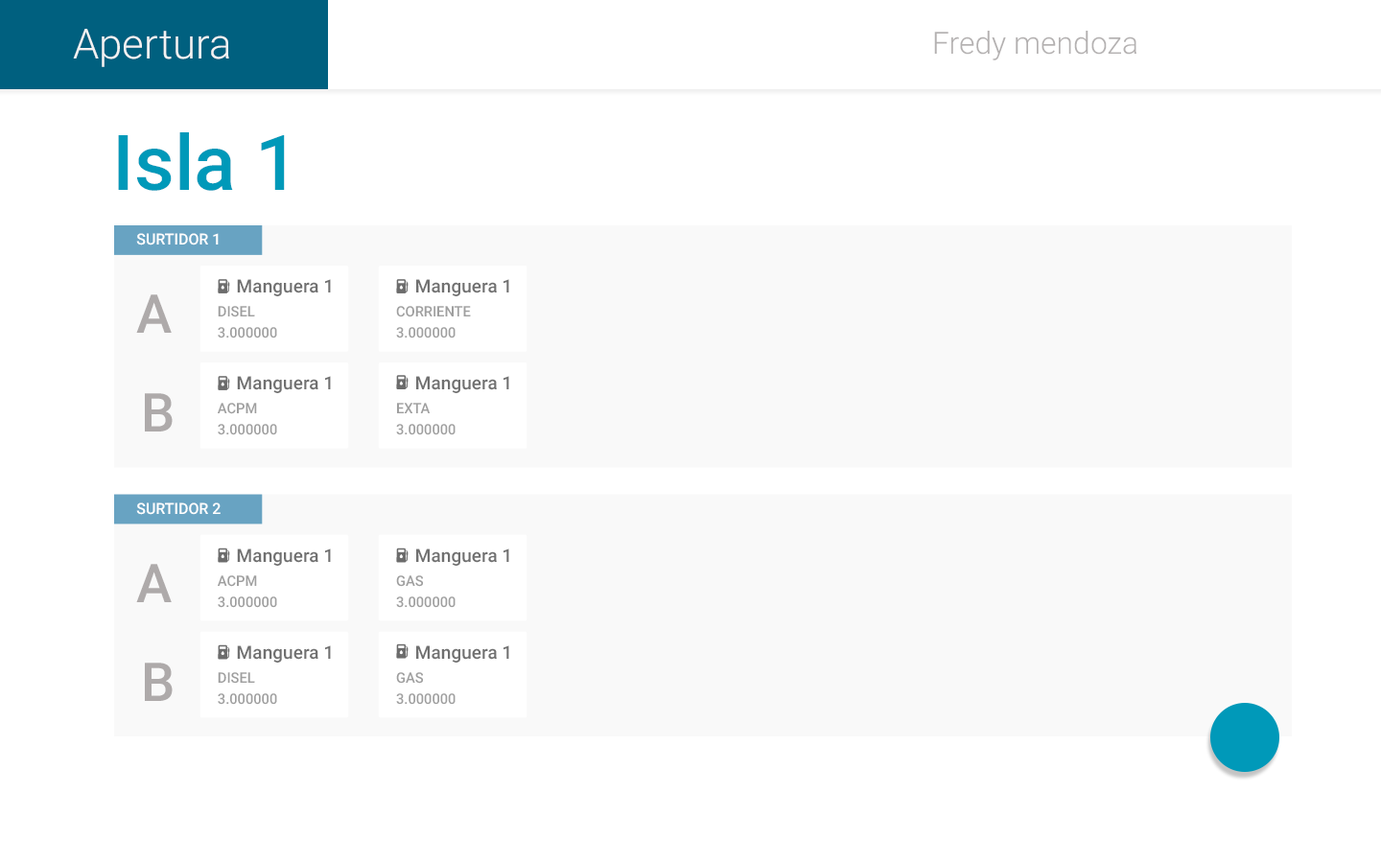
<style>
.page{position:relative;width:1381px;height:863px;background:#ffffff}
.page>*{position:absolute;margin:0}
.t1{font:41.7px "Roboto-Light";color:#f3f3f3}
.t2{font:30.7px "Roboto-Light";color:#b4b1b1}
.t3{font:76.6px "Roboto-Medium";color:#0099b9}
.t4{font:15.2px "Roboto-Medium";color:#ffffff}
.t5{font:18.3px "Roboto-Medium";color:#707070}
.t6{font:53.8px "Roboto-Medium";color:#aeaaaa}
.t7{font:14.3px "Roboto-Medium";color:#9f9f9f}
</style>
<div class="page">
<p class="t1" style="left:73px;top:29px;width:156px;height:38px">Apertura</p>
<p class="t2" style="left:934px;top:31px;width:203px;height:29px">Fredy mendoza</p>
<p class="t3" style="left:118px;top:132px;width:167px;height:59px">Isla 1</p>
<p class="t4" style="left:136px;top:233px;width:83px;height:13px">SURTIDOR 1</p>
<p class="t5" style="left:237px;top:279px;width:94px;height:17px">Manguera 1</p>
<p class="t5" style="left:416px;top:279px;width:93px;height:17px">Manguera 1</p>
<p class="t6" style="left:136px;top:294px;width:36px;height:39px">A</p>
<p class="t7" style="left:218px;top:306px;width:37px;height:11px">DISEL</p>
<p class="t7" style="left:396px;top:306px;width:75px;height:11px">CORRIENTE</p>
<p class="t7" style="left:218px;top:327px;width:59px;height:12px">3.000000</p>
<p class="t7" style="left:396px;top:327px;width:60px;height:12px">3.000000</p>
<p class="t5" style="left:237px;top:376px;width:94px;height:17px">Manguera 1</p>
<p class="t5" style="left:416px;top:376px;width:93px;height:17px">Manguera 1</p>
<p class="t6" style="left:145px;top:393px;width:28px;height:39px">B</p>
<p class="t7" style="left:218px;top:403px;width:39px;height:11px">ACPM</p>
<p class="t7" style="left:397px;top:403px;width:34px;height:10px">EXTA</p>
<p class="t7" style="left:218px;top:424px;width:59px;height:11px">3.000000</p>
<p class="t7" style="left:396px;top:424px;width:60px;height:11px">3.000000</p>
<p class="t4" style="left:136px;top:503px;width:85px;height:12px">SURTIDOR 2</p>
<p class="t5" style="left:237px;top:549px;width:94px;height:17px">Manguera 1</p>
<p class="t5" style="left:416px;top:549px;width:93px;height:17px">Manguera 1</p>
<p class="t6" style="left:136px;top:564px;width:36px;height:38px">A</p>
<p class="t7" style="left:218px;top:576px;width:39px;height:11px">ACPM</p>
<p class="t7" style="left:396px;top:576px;width:27px;height:11px">GAS</p>
<p class="t7" style="left:218px;top:597px;width:59px;height:11px">3.000000</p>
<p class="t7" style="left:396px;top:597px;width:60px;height:11px">3.000000</p>
<p class="t5" style="left:237px;top:646px;width:94px;height:17px">Manguera 1</p>
<p class="t5" style="left:416px;top:646px;width:93px;height:17px">Manguera 1</p>
<p class="t6" style="left:145px;top:663px;width:28px;height:38px">B</p>
<p class="t7" style="left:218px;top:672px;width:37px;height:12px">DISEL</p>
<p class="t7" style="left:396px;top:672px;width:27px;height:12px">GAS</p>
<p class="t7" style="left:218px;top:694px;width:59px;height:11px">3.000000</p>
<p class="t7" style="left:396px;top:694px;width:60px;height:11px">3.000000</p>
</div>
